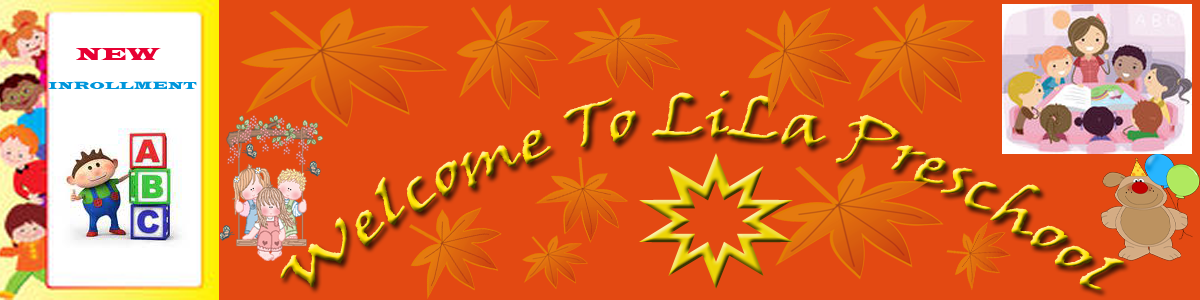
<style>
.page{position:relative;width:1200px;height:300px;background:#e34912}
.page>*{position:absolute;margin:0}
.t1{font:18px "LatinWide";color:#e70033}
.t2{font:11px "LatinWide";color:#0096db}
.t3{font:60px "VinerHandITC"}
</style>
<div class="page">
<p class="t1" style="left:76px;top:48px;width:85px;height:12px">NEW</p>
<p class="t2" style="left:48px;top:81px;width:149px;height:8px">INROLLMENT</p>
<p class="t3" style="left:280px;top:90px;width:844px;height:201px">Welcome To LiLa Preschool</p>
</div>
